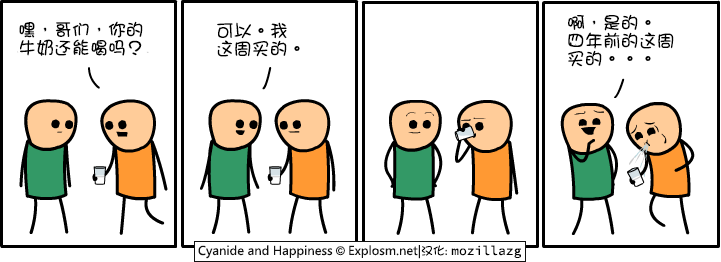
<style>
.page{position:relative;width:721px;height:262px;background:#ffffff}
.page>*{position:absolute;margin:0}
.t1{font:18px/18px "DFGirl";color:#000000}
</style>
<div class="page">
<p class="t1" style="left:568px;top:14px;width:106px;height:53px">啊，是的。<br>四年前的这周<br>买的。。。</p>
<p class="t1" style="left:19px;top:21px;width:124px;height:35px">嘿，哥们，你的<br>牛奶还能喝吗？</p>
<p class="t1" style="left:217px;top:22px;width:83px;height:35px">可以。我<br>这周买的。</p>
</div>
